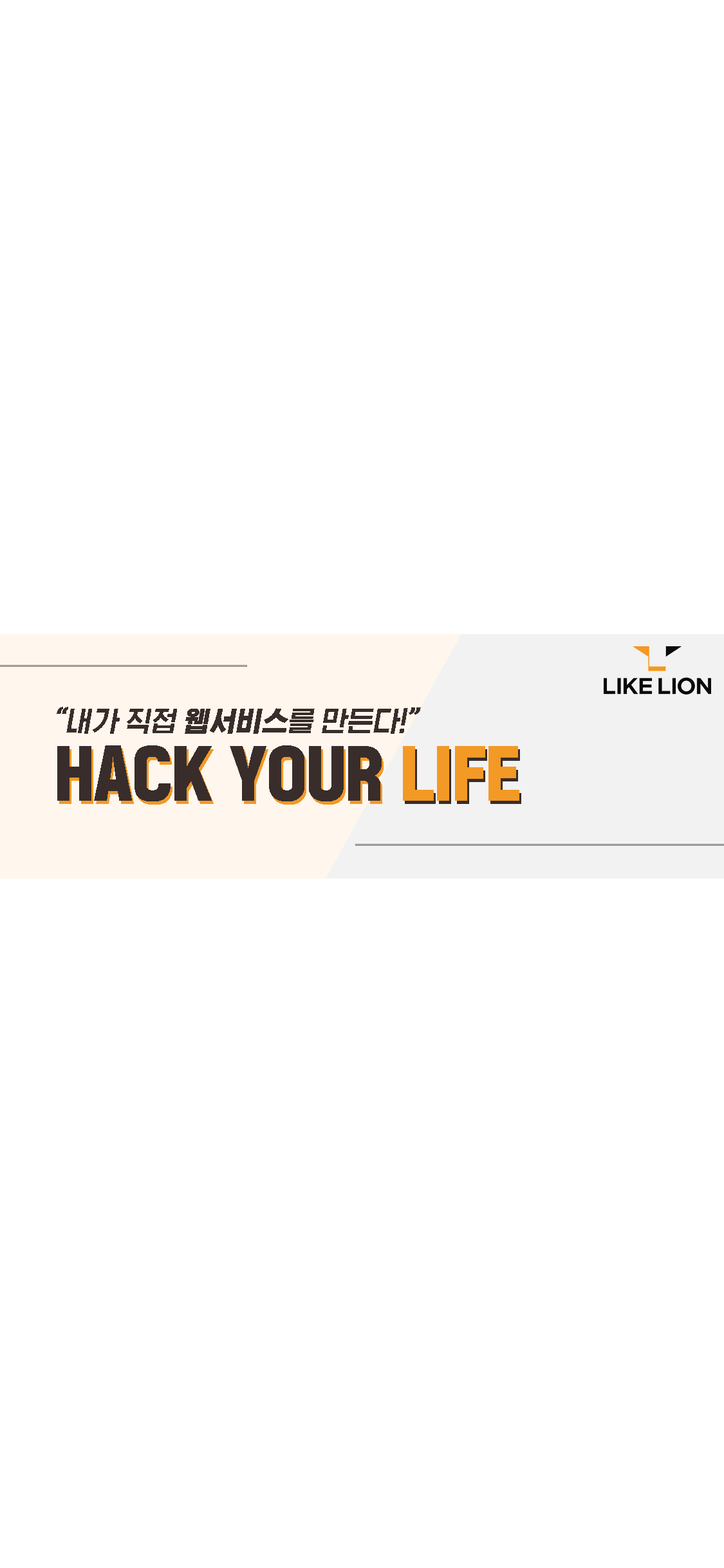
<style>
.page{position:relative;width:724px;height:1568px;background:#ffffff}
.page>*{position:absolute;margin:0}
.t1{font:29px "HGGGothicssi80g";color:#382d2b;font-style:italic}
.t2{font:29px "HGGGothicssi99g";color:#382d2b;font-style:italic}
.t3{font:71.4px "HGGGothicssi99g";color:#382d2b}
.t4{font:71.4px "HGGGothicssi99g";color:#f39925}
</style>
<div class="page">
<p class="t1" style="left:57px;top:707px;width:364px;height:27px">“내가 직접<span class="t2"> 웹서비스</span>를 만든다!”</p>
<p class="t3" style="left:57px;top:745px;width:462px;height:56px">HACK YOUR <span class="t4">LIFE</span></p>
<p class="t4" style="left:59px;top:749px;width:462px;height:56px">HACK YOUR<span class="t3"> LIFE</span></p>
</div>
